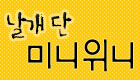
<style>
.page{position:relative;width:140px;height:80px;background:#ffcc00}
.page>*{position:absolute;margin:0}
.t1{font:33px "SanKbL";letter-spacing:-0.05em;color:#000000;scale:0.91 1}
.t2{font:40px "YDIPinoL";letter-spacing:-0.1em;color:#000000}
</style>
<div class="page">
<p class="t1" style="left:7px;top:12px;width:65px;height:27px">날개 단</p>
<p class="t1" style="left:7px;top:12px;width:65px;height:27px;opacity:0.39">날개 단</p>
<p class="t2" style="left:28px;top:39px;width:105px;height:33px">미니위니</p>
</div>
